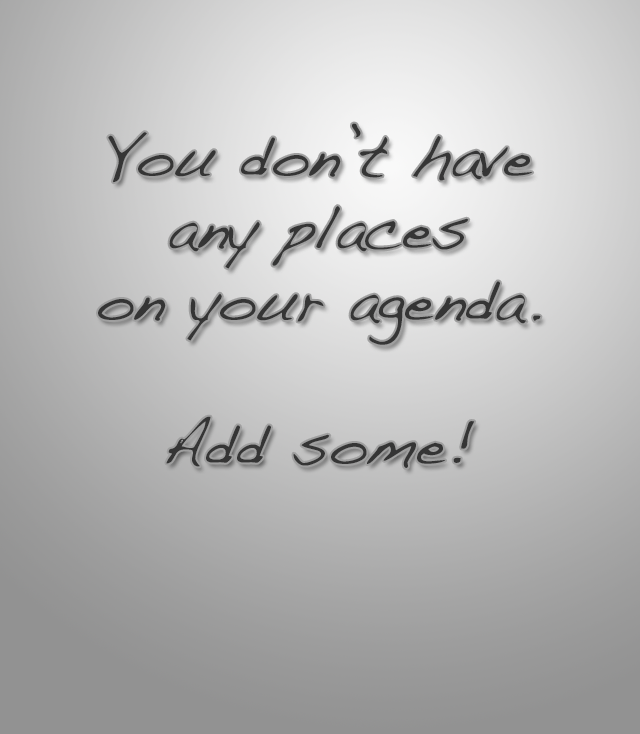
<style>
.page{position:relative;width:640px;height:734px}
.page>*{position:absolute;margin:0}
.t1{font:60px "Handwriting-Dakota";color:#353535}
</style>
<div class="page">
<p class="t1" style="left:98px;top:123px;width:443px;height:345px;text-align:center">You don’t have<br>any places<br>on your agenda.<br><br>Add some!</p>
</div>
